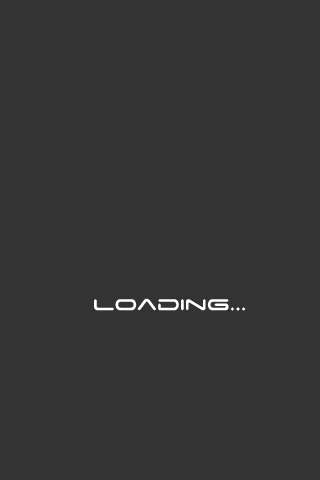
<style>
.page{position:relative;width:320px;height:480px;background:#333333}
.page>*{position:absolute;margin:0}
.t1{font:25px "SpaceAge";color:#ffffff}
</style>
<div class="page">
<p class="t1" style="left:94px;top:298px;width:152px;height:13px">Loading...</p>
</div>
